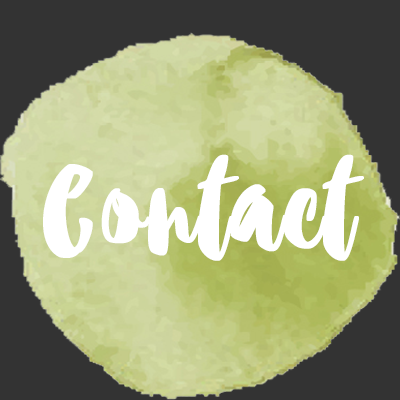
<style>
.page{position:relative;width:400px;height:400px;background:#333333}
.page>*{position:absolute;margin:0}
.t1{font:100px "Stonestickfreetester";color:#ffffff;font-weight:bold}
</style>
<div class="page">
<p class="t1" style="left:43px;top:154px;width:321px;height:107px">Contact</p>
</div>
